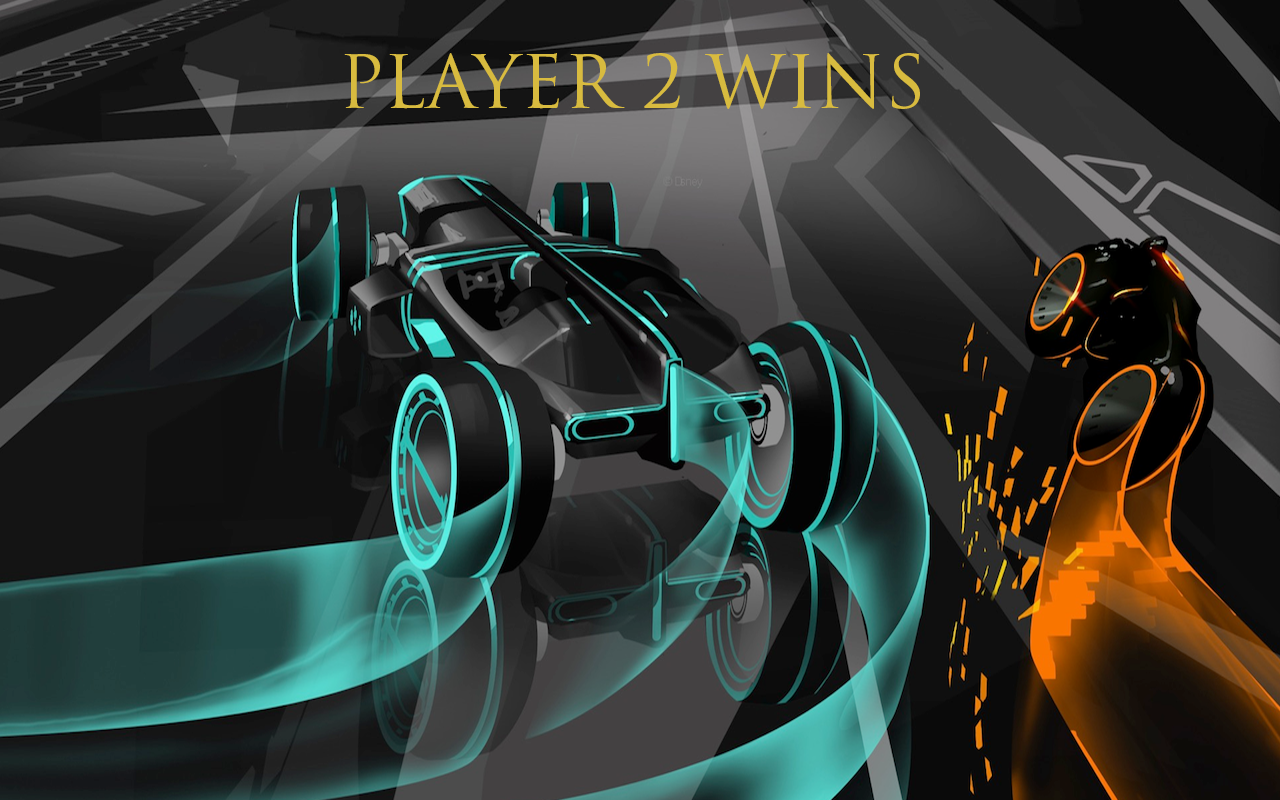
<style>
.page{position:relative;width:1280px;height:800px}
.page>*{position:absolute;margin:0}
.t1{font:72px "TrajanPro-Regular";color:#d8bb3f}
</style>
<div class="page">
<p class="t1" style="left:344px;top:53px;width:576px;height:56px">PLAYER 2 WINS</p>
</div>
